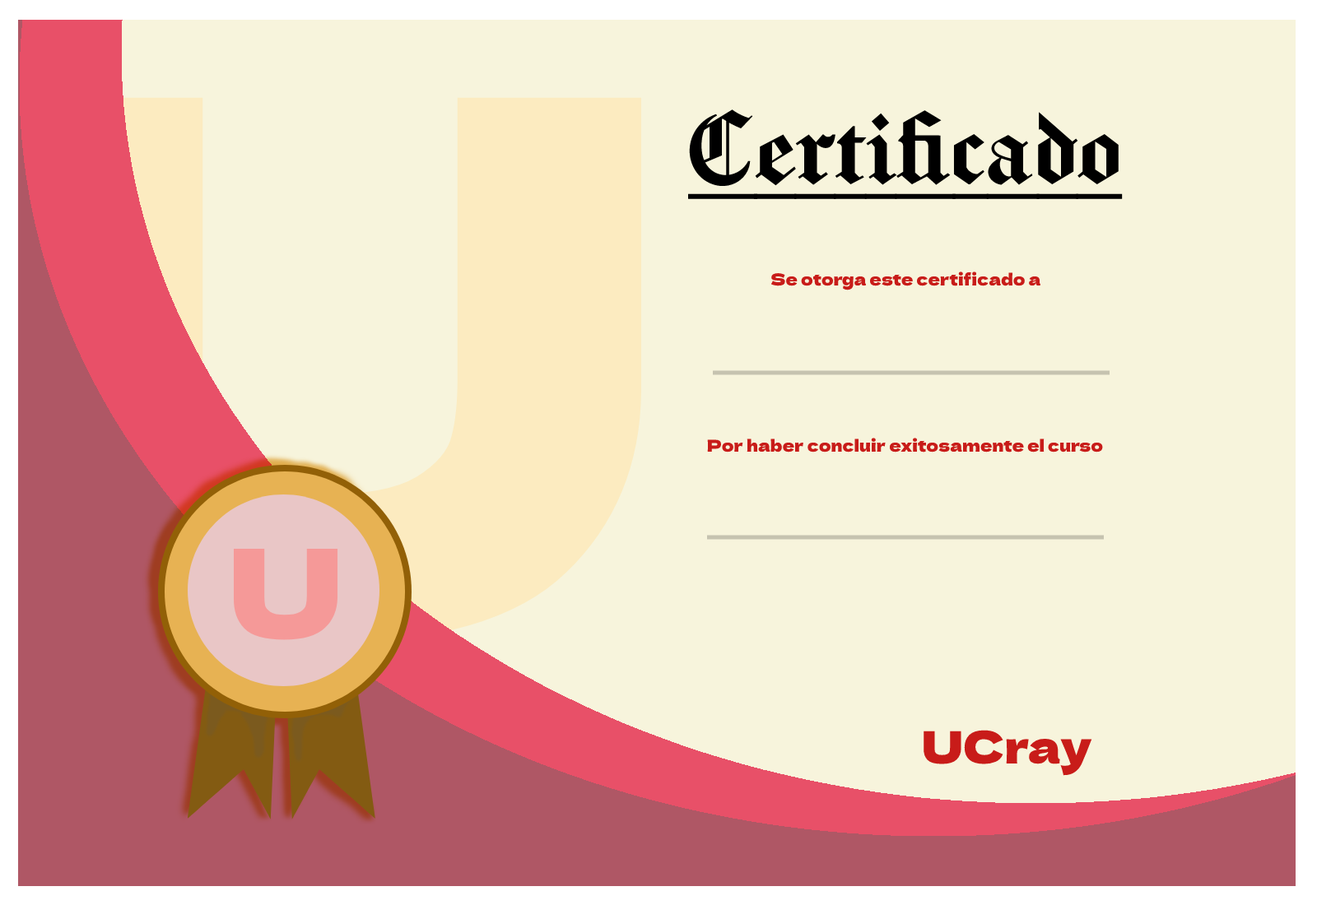
<style>
.page{position:relative;width:1317px;height:905px;background:#f7f4dc}
.page>*{position:absolute;margin:0}
.t1{font:740.8px "DelaGothicOne-Regular"}
.t2{font:97.1px "Chomsky";color:#000000;text-decoration:underline}
.t3{font:16.5px "DelaGothicOne-Regular";color:#c81c19}
.t4{font:123.5px "DelaGothicOne-Regular";color:#f59998}
.t5{font:44.4px "DelaGothicOne-Regular";color:#c81c19}
</style>
<div class="page">
<p class="t1" style="left:17px;top:97px;width:624px;height:547px">U</p>
<p class="t2" style="left:688px;top:109px;width:435px;height:90px">Certificado</p>
<p class="t3" style="left:770px;top:272px;width:270px;height:19px">Se otorga este certificado a</p>
<p class="t3" style="left:707px;top:438px;width:396px;height:15px">Por haber concluir exitosamente el curso</p>
<p class="t4" style="left:233px;top:548px;width:104px;height:92px">U</p>
<p class="t5" style="left:924px;top:730px;width:168px;height:46px">UCray</p>
</div>
